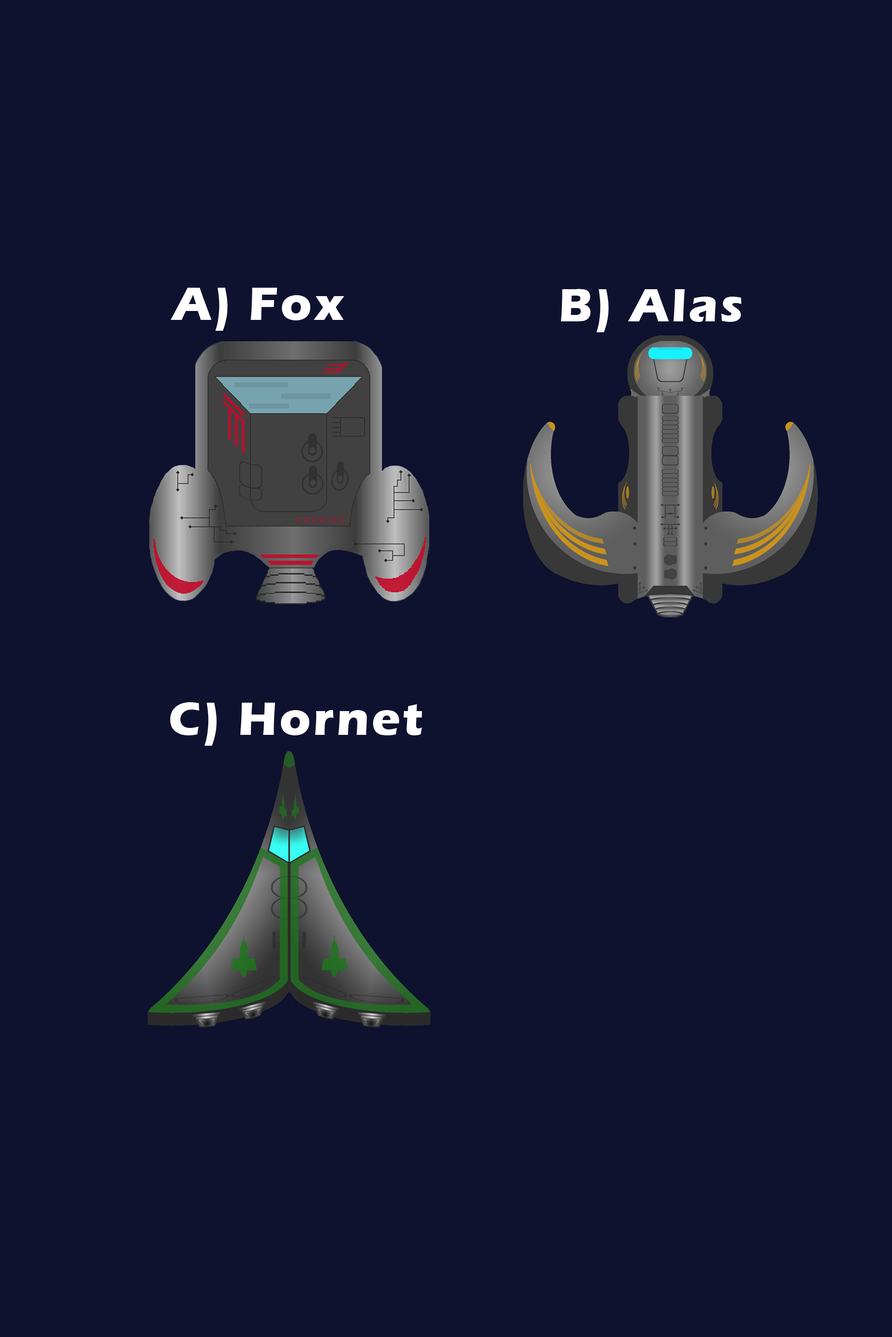
<style>
.page{position:relative;width:892px;height:1337px;background:#0e122f}
.page>*{position:absolute;margin:0}
.t1{font:48.2px "ErasITC-Bold";letter-spacing:0.05em;color:#ffffff}
</style>
<div class="page">
<p class="t1" style="left:170px;top:288px;width:174px;height:43px">A) Fox</p>
<p class="t1" style="left:560px;top:289px;width:181px;height:43px">B) Alas</p>
<p class="t1" style="left:170px;top:702px;width:252px;height:44px">C) Hornet</p>
</div>
